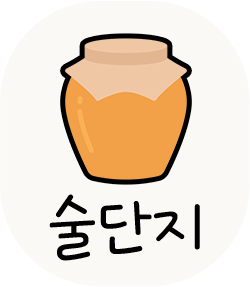
<style>
.page{position:relative;width:250px;height:287px;background:#fbf9f5}
.page>*{position:absolute;margin:0}
.t1{font:91.7px "GangwonEduSaeeumMedium";color:#000000}
</style>
<div class="page">
<p class="t1" style="left:49px;top:194px;width:151px;height:67px">술단지</p>
</div>
